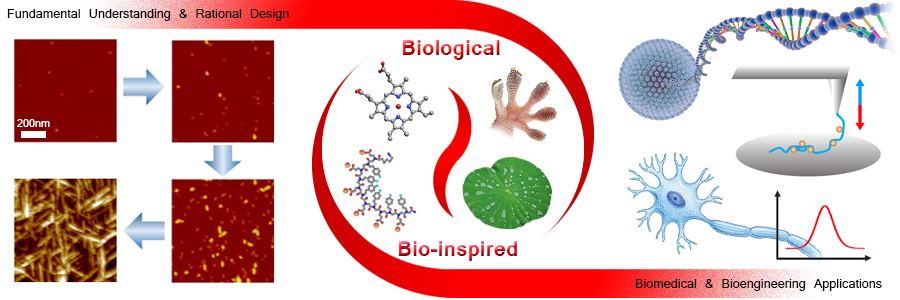
<style>
.page{position:relative;width:900px;height:300px;background:#ffffff}
.page>*{position:absolute;margin:0}
.t1{font:14px "Latha";color:#000000}
.t2{font:24px "Latha-Bold"}
.t3{font:12px "Latha";color:#ffffff}
</style>
<div class="page">
<p class="t1" style="left:7px;top:9px;width:282px;height:12px">Fundamental Understanding &amp; Rational Design</p>
<p class="t2" style="left:402px;top:40px;width:98px;height:20px">Biological</p>
<p class="t3" style="left:17px;top:119px;width:33px;height:8px">200nm</p>
<p class="t2" style="left:398px;top:241px;width:119px;height:20px">Bio-inspired</p>
<p class="t1" style="left:635px;top:279px;width:247px;height:12px">Biomedical &amp; Bioengineering Applications</p>
</div>
